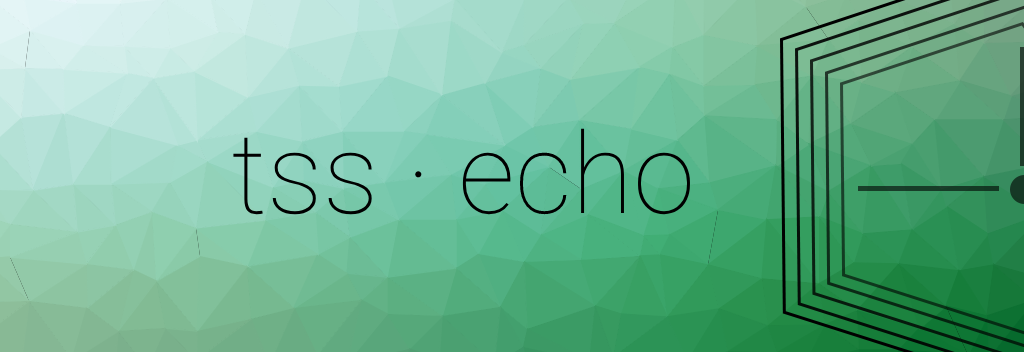
<style>
.page{position:relative;width:1024px;height:352px}
.page>*{position:absolute;margin:0}
.t1{font:112.3px "Roboto-Thin";color:#000000}
</style>
<div class="page">
<p class="t1" style="left:233px;top:128px;width:457px;height:87px">tss · echo</p>
</div>
